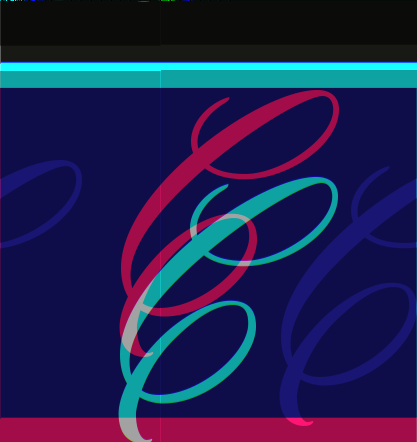
<style>
.page{position:relative;width:417px;height:442px;background:#0f0d49}
.page>*{position:absolute;margin:0}
.t1{font:356px "Cylburn-Regular";color:#a20d49}
</style>
<div class="page">
<p class="t1" style="left:118px;top:89px;width:220px;height:267px">C</p>
</div>
